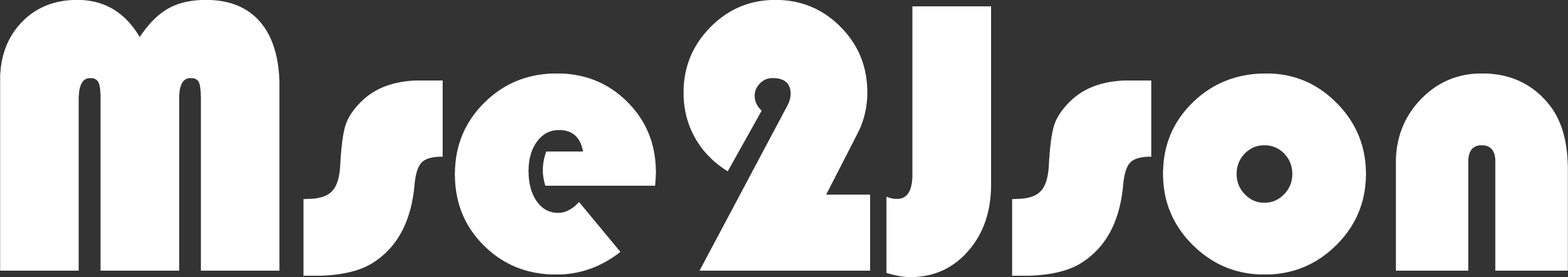
<style>
.page{position:relative;width:1568px;height:277px;background:#ffffff}
.page>*{position:absolute;margin:0}
.t1{font:395.8px "Bauhaus93";color:#ffffff}
</style>
<div class="page">
<p class="t1" style="left:0px;top:0px;width:1568px;height:277px">Mse2Json</p>
</div>
